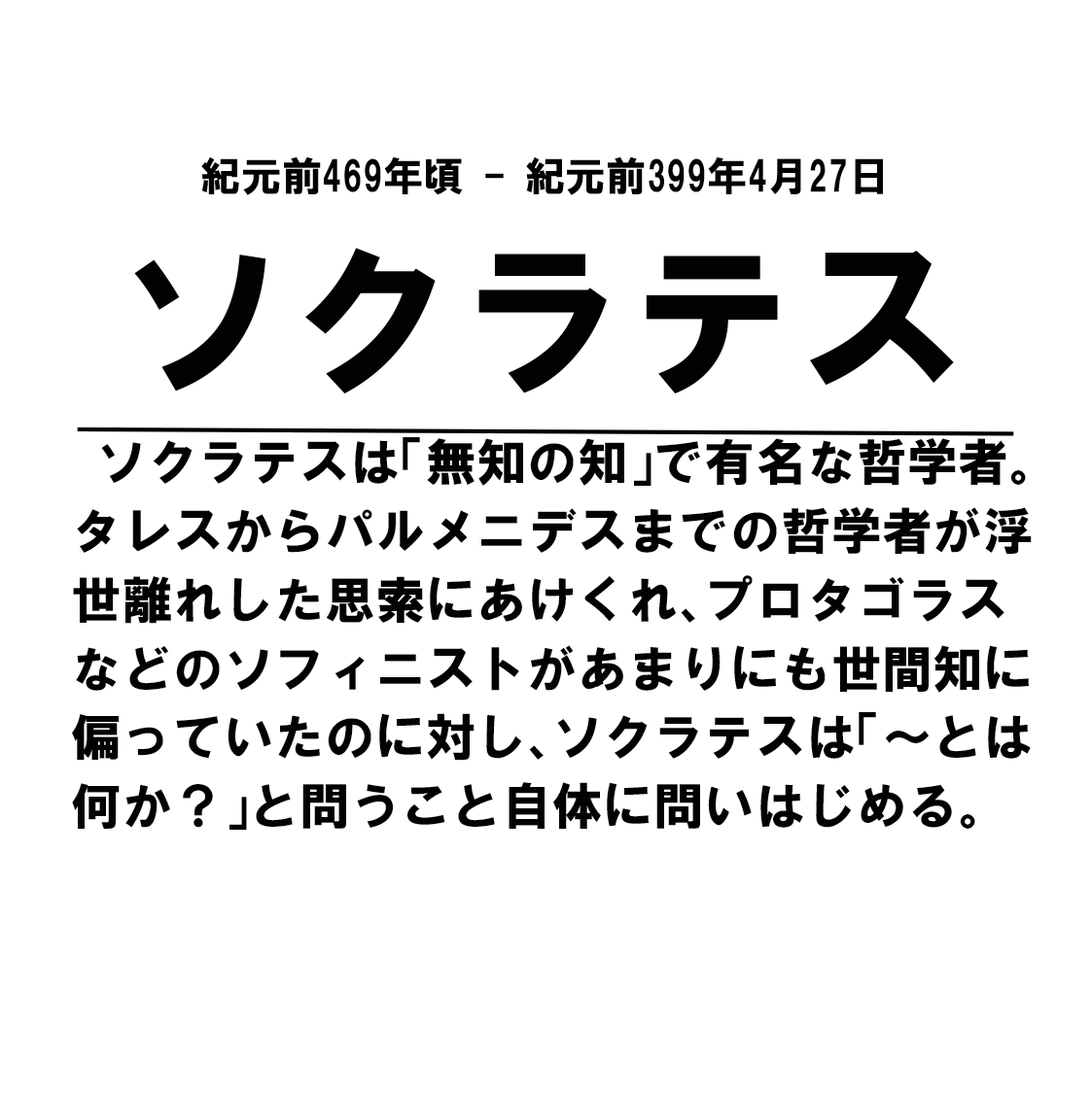
<style>
.page{position:relative;width:1091px;height:1093px;background:#ffffff}
.page>*{position:absolute;margin:0}
.t1{font:40.5px "HGSoeiKakugothicUB";color:#020202}
.t2{font:170.1px "HGSoeiKakugothicUB";color:#020202}
.t3{font:50.6px/68.8px "HGSoeiKakugothicUB";color:#020202}
</style>
<div class="page">
<p class="t1" style="left:201px;top:156px;width:682px;height:39px">紀元前469年頃 - 紀元前399年4月27日</p>
<p class="t2" style="left:134px;top:248px;width:819px;height:146px">ソクラテス</p>
<p class="t3" style="left:72px;top:437px;width:959px;height:393px">ソクラテスは「無知の知」で有名な哲学者。タレスからパルメニデスまでの哲学者が浮世離れした思索にあけくれ、プロタゴラスなどのソフィニストがあまりにも世間知に偏っていたのに対し、ソクラテスは「〜とは何か？」と問うこと自体に問いはじめる。</p>
</div>
